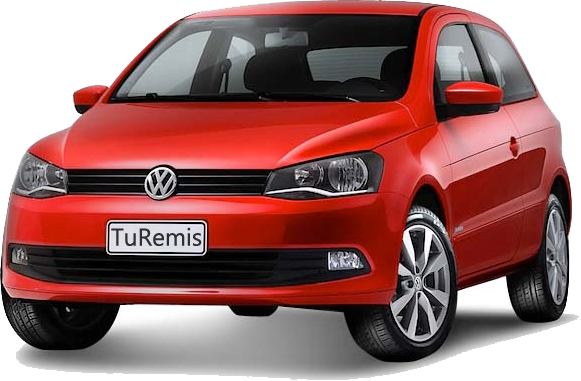
<style>
.page{position:relative;width:581px;height:381px}
.page>*{position:absolute;margin:0}
.t1{font:24.4px "MicrosoftNewTaiLue";color:#2f2f2f}
</style>
<div class="page">
<p class="t1" style="left:111px;top:227px;width:91px;height:19px">TuRemis</p>
</div>
